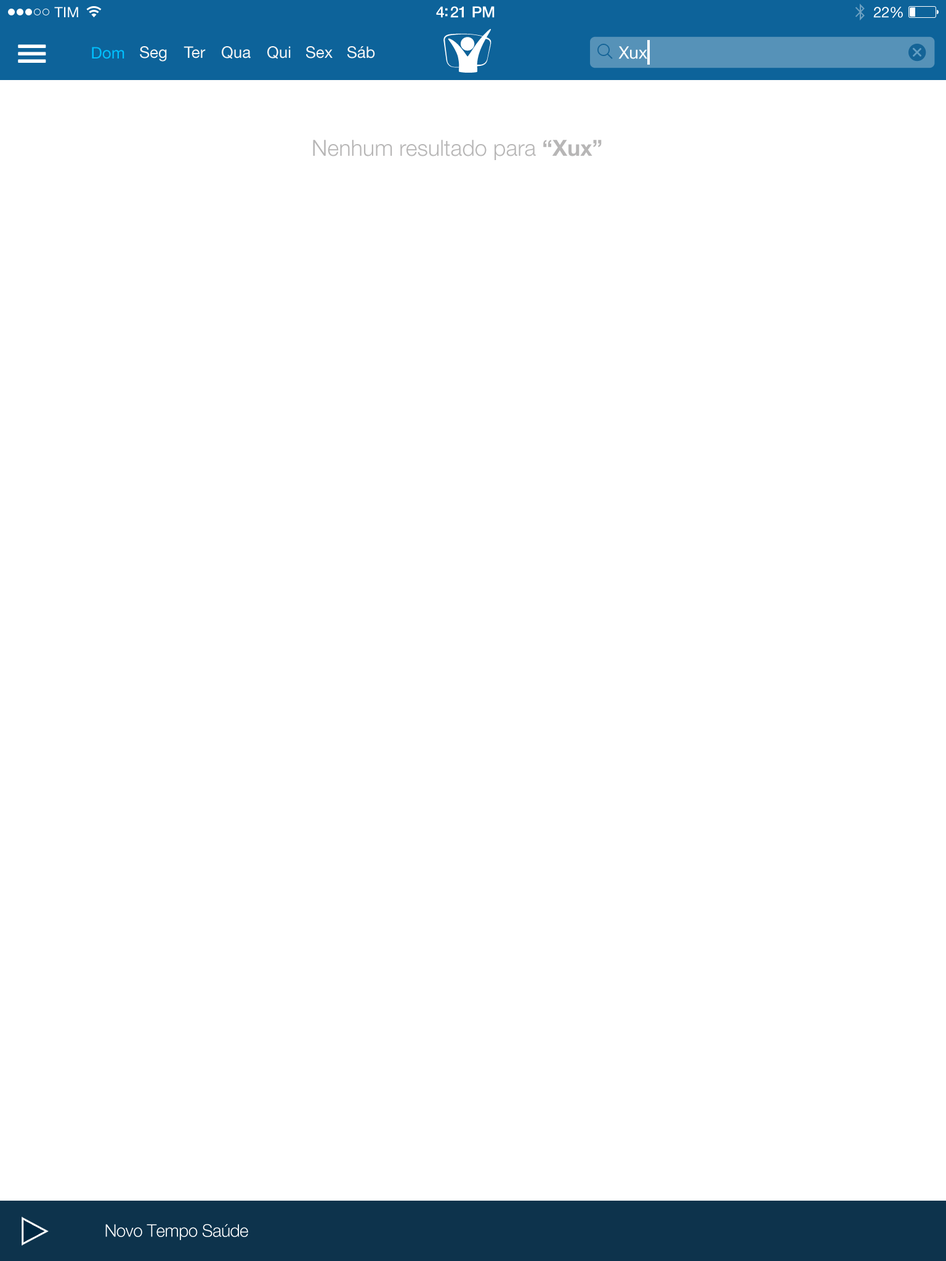
<style>
.page{position:relative;width:946px;height:1261px;background:#ffffff}
.page>*{position:absolute;margin:0}
.t1{font:16px "HelveticaNeueLTStd-Roman";color:#00c0ff}
.t2{font:16px "HelveticaNeueLTStd-Roman";color:#f5f5f5}
.t3{font:17.2px "HelveticaNeueLTStd-Roman";letter-spacing:-0.01em;color:#ffffff}
.t4{font:22.2px "HelveticaNeueLTStd-Lt";color:#b7b6b6}
.t5{font:22.2px "HelveticaNeueLTStd-Bd";color:#b7b6b6}
.t6{font:17.2px "HelveticaNeueLTStd-Lt";letter-spacing:-0.02em;color:#ffffff}
</style>
<div class="page">
<p class="t1" style="left:92px;top:47px;width:32px;height:12px">Dom</p>
<p class="t2" style="left:140px;top:46px;width:27px;height:16px">Seg</p>
<p class="t2" style="left:183px;top:46px;width:23px;height:12px">Ter</p>
<p class="t2" style="left:222px;top:46px;width:29px;height:13px">Qua</p>
<p class="t2" style="left:267px;top:46px;width:24px;height:13px">Qui</p>
<p class="t2" style="left:306px;top:46px;width:26px;height:12px">Sex</p>
<p class="t2" style="left:347px;top:46px;width:28px;height:12px">Sáb</p>
<p class="t3" style="left:618px;top:46px;width:29px;height:13px">Xux</p>
<p class="t4" style="left:313px;top:140px;width:289px;height:20px">Nenhum resultado para <span class="t5">“Xux”</span></p>
<p class="t6" style="left:105px;top:1224px;width:143px;height:16px">Novo Tempo Saúde</p>
</div>
